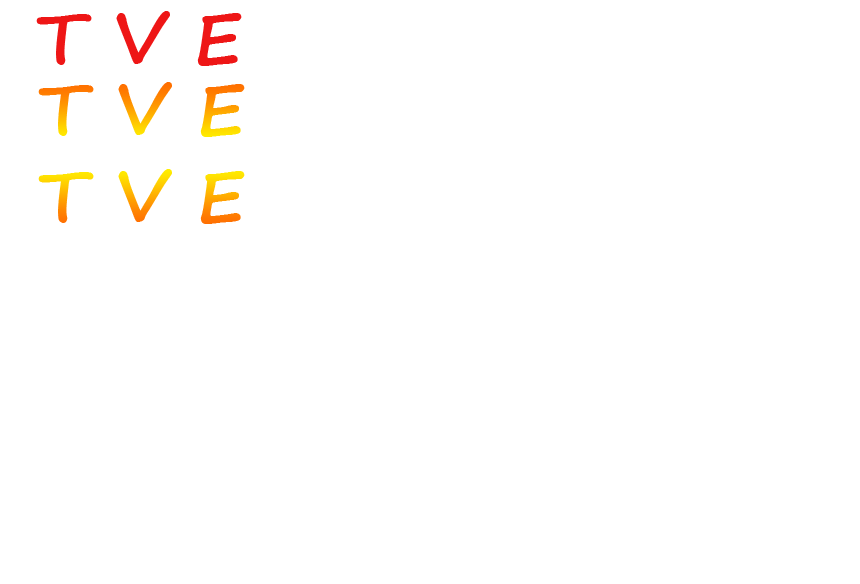
<style>
.page{position:relative;width:860px;height:584px;background:#ffffff}
.page>*{position:absolute;margin:0}
.t1{font:72px "SegoePrint-Bold";color:#ee1616}
.t2{font:72px "SegoePrint-Bold"}
</style>
<div class="page">
<p class="t1" style="left:36px;top:11px;width:206px;height:55px">T V E</p>
<p class="t2" style="left:38px;top:82px;width:207px;height:142px">T V E<br>T V E</p>
</div>
